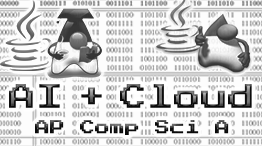
<style>
.page{position:relative;width:262px;height:146px;background:#fdfdfd}
.page>*{position:absolute;margin:0}
.t1{font:27px "PressStart2P-Regular"}
.t2{font:15px "PressStart2P-Regular"}
</style>
<div class="page">
<p class="t1" style="left:9px;top:84px;width:243px;height:24px">AI + Cloud</p>
<p class="t2" style="left:35px;top:120px;width:194px;height:15px">AP Comp Sci A</p>
</div>
